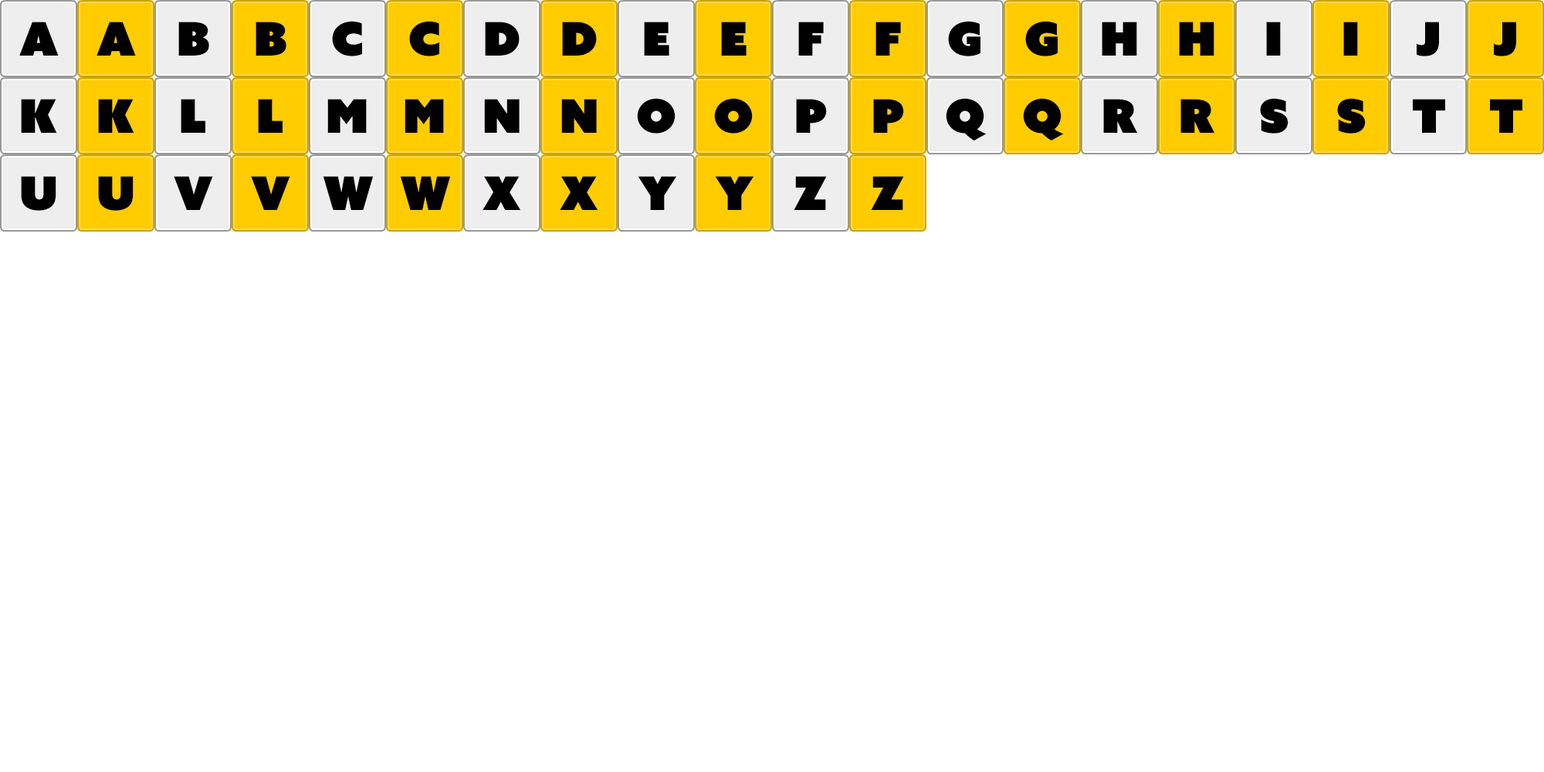
<style>
.page{position:relative;width:1544px;height:772px;background:#ffffff}
.page>*{position:absolute;margin:0}
.t1{font:46.3px "AzoSansUber-Regular";color:#000000}
</style>
<div class="page">
<p class="t1" style="left:19px;top:22px;width:40px;height:34px">A</p>
<p class="t1" style="left:97px;top:22px;width:39px;height:34px">A</p>
<p class="t1" style="left:178px;top:22px;width:31px;height:34px">B</p>
<p class="t1" style="left:256px;top:22px;width:30px;height:34px">B</p>
<p class="t1" style="left:332px;top:21px;width:30px;height:35px">C</p>
<p class="t1" style="left:409px;top:21px;width:30px;height:35px">C</p>
<p class="t1" style="left:485px;top:22px;width:35px;height:34px">D</p>
<p class="t1" style="left:562px;top:22px;width:35px;height:34px">D</p>
<p class="t1" style="left:644px;top:22px;width:25px;height:34px">E</p>
<p class="t1" style="left:721px;top:22px;width:26px;height:34px">E</p>
<p class="t1" style="left:798px;top:22px;width:26px;height:34px">F</p>
<p class="t1" style="left:876px;top:22px;width:25px;height:34px">F</p>
<p class="t1" style="left:948px;top:21px;width:33px;height:35px">G</p>
<p class="t1" style="left:1025px;top:21px;width:33px;height:35px">G</p>
<p class="t1" style="left:1102px;top:22px;width:35px;height:34px">H</p>
<p class="t1" style="left:1179px;top:22px;width:36px;height:34px">H</p>
<p class="t1" style="left:1266px;top:22px;width:15px;height:34px">I</p>
<p class="t1" style="left:1344px;top:22px;width:14px;height:34px">I</p>
<p class="t1" style="left:1417px;top:22px;width:22px;height:34px">J</p>
<p class="t1" style="left:1494px;top:22px;width:23px;height:34px">J</p>
<p class="t1" style="left:21px;top:99px;width:36px;height:34px">K</p>
<p class="t1" style="left:98px;top:99px;width:36px;height:34px">K</p>
<p class="t1" style="left:181px;top:99px;width:24px;height:34px">L</p>
<p class="t1" style="left:258px;top:99px;width:25px;height:34px">L</p>
<p class="t1" style="left:327px;top:99px;width:40px;height:34px">M</p>
<p class="t1" style="left:405px;top:99px;width:39px;height:34px">M</p>
<p class="t1" style="left:484px;top:99px;width:36px;height:34px">N</p>
<p class="t1" style="left:561px;top:99px;width:36px;height:34px">N</p>
<p class="t1" style="left:637px;top:98px;width:39px;height:36px">O</p>
<p class="t1" style="left:714px;top:98px;width:39px;height:36px">O</p>
<p class="t1" style="left:796px;top:99px;width:31px;height:34px">P</p>
<p class="t1" style="left:873px;top:99px;width:31px;height:34px">P</p>
<p class="t1" style="left:946px;top:98px;width:41px;height:43px">Q</p>
<p class="t1" style="left:1023px;top:98px;width:41px;height:43px">Q</p>
<p class="t1" style="left:1103px;top:99px;width:35px;height:34px">R</p>
<p class="t1" style="left:1181px;top:99px;width:34px;height:34px">R</p>
<p class="t1" style="left:1260px;top:98px;width:29px;height:36px">S</p>
<p class="t1" style="left:1337px;top:98px;width:29px;height:36px">S</p>
<p class="t1" style="left:1413px;top:99px;width:32px;height:34px">T</p>
<p class="t1" style="left:1490px;top:99px;width:33px;height:34px">T</p>
<p class="t1" style="left:21px;top:176px;width:35px;height:35px">U</p>
<p class="t1" style="left:98px;top:176px;width:36px;height:35px">U</p>
<p class="t1" style="left:174px;top:176px;width:39px;height:34px">V</p>
<p class="t1" style="left:251px;top:176px;width:39px;height:34px">V</p>
<p class="t1" style="left:323px;top:176px;width:51px;height:34px">W</p>
<p class="t1" style="left:400px;top:176px;width:51px;height:34px">W</p>
<p class="t1" style="left:483px;top:176px;width:38px;height:34px">X</p>
<p class="t1" style="left:560px;top:176px;width:38px;height:34px">X</p>
<p class="t1" style="left:638px;top:176px;width:39px;height:34px">Y</p>
<p class="t1" style="left:715px;top:176px;width:39px;height:34px">Y</p>
<p class="t1" style="left:794px;top:176px;width:33px;height:34px">Z</p>
<p class="t1" style="left:871px;top:176px;width:33px;height:34px">Z</p>
</div>
